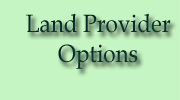
<style>
.page{position:relative;width:180px;height:100px;background:#c5f5c2}
.page>*{position:absolute;margin:0}
.t1{font:25px "BookAntiqua";color:#05312c;scale:0.9 1}
</style>
<div class="page">
<p class="t1" style="left:26px;top:13px;width:145px;height:56px;text-align:center">Land Provider<br>Options</p>
</div>
